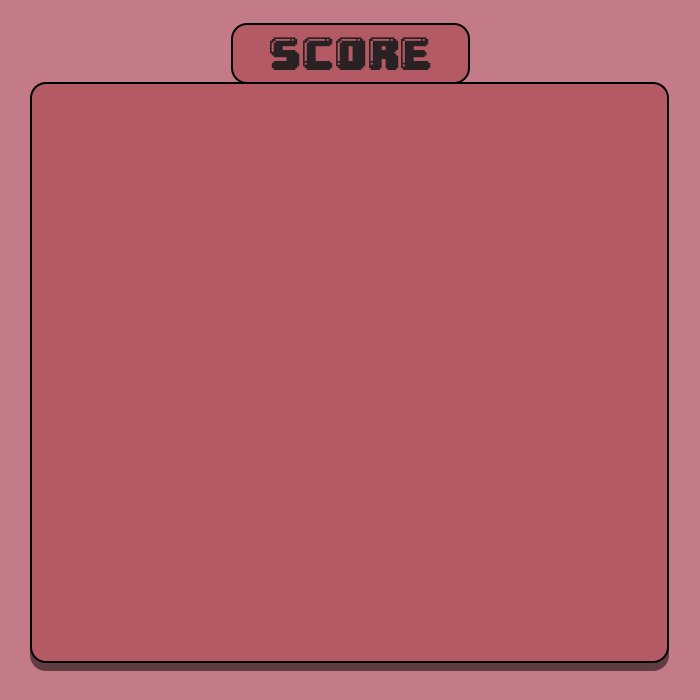
<style>
.page{position:relative;width:700px;height:700px;background:#b45a65}
.page>*{position:absolute;margin:0}
.t1{font:58.3px "Gumball";color:#2a2122}
</style>
<div class="page">
<p class="t1" style="left:270px;top:37px;width:161px;height:33px">score</p>
</div>
